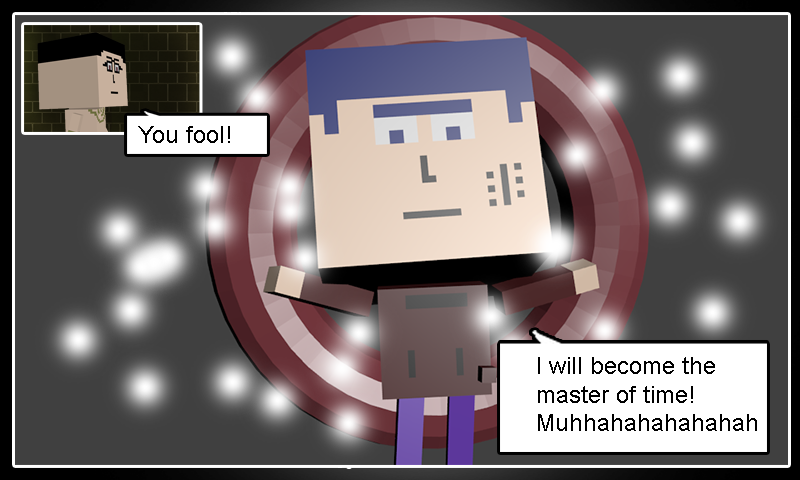
<style>
.page{position:relative;width:800px;height:480px}
.page>*{position:absolute;margin:0}
.t1{font:24px "ArialMT";color:#000000}
</style>
<div class="page">
<p class="t1" style="left:138px;top:126px;width:92px;height:17px">You fool!</p>
<p class="t1" style="left:538px;top:357px;width:219px;height:74px">I will become the<br>master of time!<br>Muhhahahahahahah</p>
</div>
